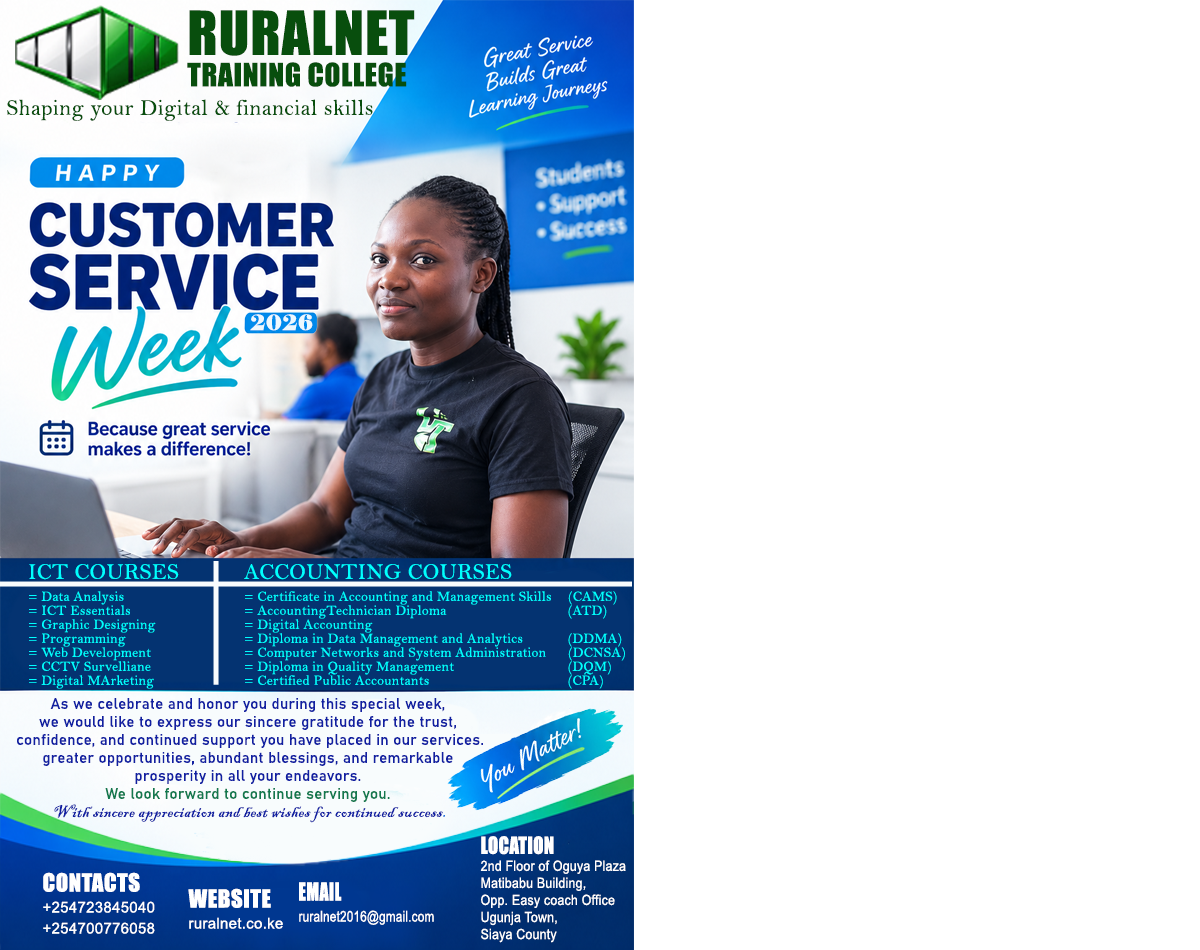
<style>
.page{position:relative;width:1200px;height:950px;background:#ffffff}
.page>*{position:absolute;margin:0}
.t1{font:56px "Impact";letter-spacing:0.02em;color:#084e0d}
.t2{font:29.5px "Impact";letter-spacing:0.02em;color:#084e0d}
.t3{font:22.5px "BellMT";letter-spacing:0.02em;color:#084e0d}
.t4{font:21px "Elephant-Regular";letter-spacing:0.02em;color:#eef8fe}
.t5{font:14px/14px "BellMT";letter-spacing:0.02em;color:#00ffff}
.t6{font:22.5px/22px "BellMT";letter-spacing:0.02em;color:#00ffff}
.t7{font:14px/22px "BellMT";letter-spacing:0.02em;color:#00ffff}
.t8{font:15px/18px "Bahnschrift";letter-spacing:0.02em;color:#1120a2}
.t9{font:15px/18px "Bahnschrift";letter-spacing:0.02em;color:#12794e}
.t10{font:18px/18px "BlackadderITC-Regular";letter-spacing:0.02em;color:#1120a2}
.t11{font:19px/18px "BlackadderITC-Regular";letter-spacing:0.02em;color:#0067db}
.t12{font:14.2px/17.1px "ArialMT";letter-spacing:0.02em;color:#ffffff;scale:0.87 1}
.t13{font:21.8px/25.6px "Impact";letter-spacing:0.02em;color:#ffffff;scale:0.87 1}
.t14{font:15px/21px "ArialMT";letter-spacing:0.02em;color:#ffffff}
.t15{font:23px/27px "Impact";letter-spacing:0.02em;color:#ffffff}
.t16{font:15px/21px "ArialMT";letter-spacing:0.02em;color:#ffffff;scale:0.78 1}
.t17{font:23px/27px "Impact";letter-spacing:0.02em;color:#ffffff;scale:0.78 1}
</style>
<div class="page">
<p class="t1" style="left:189px;top:10px;width:226px;height:46px">RURALNET</p>
<p class="t2" style="left:187px;top:62px;width:220px;height:25px">TRAINING COLLEGE</p>
<p class="t3" style="left:7px;top:99px;width:366px;height:22px">Shaping your Digital &amp; financial skills</p>
<p class="t4" style="left:250px;top:314px;width:63px;height:17px">2026</p>
<p class="t5" style="left:29px;top:564px;width:150px;height:125px"><span class="t6">ICT COURSES<br></span><span class="t7">= Data Analysis<br></span>= ICT Essentials<br>= Graphic Designing <br>= Programming<br>= Web Development<br>= CCTV Survelliane<br>= Digital MArketing</p>
<p class="t5" style="left:244px;top:564px;width:381px;height:125px"><span class="t6">ACCOUNTING COURSES<br></span><span class="t7">= Certificate in Accounting and Management Skills (CAMS)<br></span>= AccountingTechnician Diploma       (ATD)<br>= Digital Accounting <br>= Diploma in Data Management and Analytics   (DDMA)<br>= Computer Networks and System Administration (DCNSA)<br>= Diploma in Quality Management    (DQM)<br>= Certified Public Accountants    (CPA)</p>
<p class="t8" style="left:17px;top:698px;width:466px;height:125px;text-align:center">As we celebrate and honor you during this special week, <br>we would like to express our sincere gratitude for the trust, <br>confidence, and continued support you have placed in our services.<br>greater opportunities, abundant blessings, and remarkable <br>prosperity in all your endeavors. <br><span class="t9">We look forward to continue serving you. <br></span><span class="t10">With sincere appreciation and best wishes for continued success</span><span class="t11">.</span></p>
<p class="t12" style="left:480px;top:836px;width:146px;height:107px"><span class="t13">LOCATION<br></span>2nd Floor of Oguya Plaza <br>Matibabu Building,<br>Opp. Easy coach Office<br>Ugunja Town,<br>Siaya County</p>
<p class="t14" style="left:43px;top:872px;width:112px;height:62px"><span class="t15">CONTACTS<br></span>+254723845040<br>+254700776058</p>
<p class="t14" style="left:188px;top:888px;width:95px;height:41px"><span class="t15">WEBSITE<br></span>ruralnet.co.ke</p>
<p class="t16" style="left:299px;top:882px;width:135px;height:43px"><span class="t17">EMAIL<br></span>ruralnet2016@gmail.com</p>
</div>
